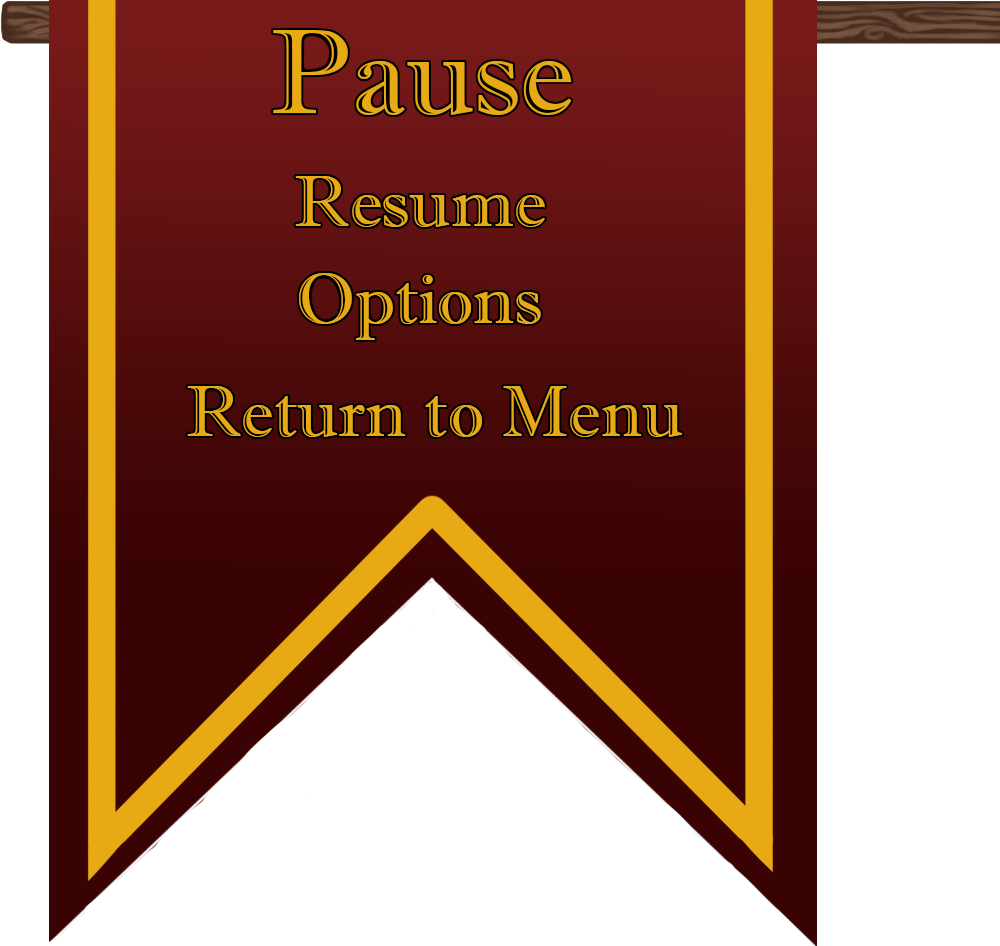
<style>
.page{position:relative;width:1000px;height:946px;background:#ffffff}
.page>*{position:absolute;margin:0}
.t1{font:120px "ImprintMT-Shadow";color:#e7a914}
.t2{font:72px "ImprintMT-Shadow";color:#e7a914}
</style>
<div class="page">
<p class="t1" style="left:273px;top:30px;width:299px;height:85px">Pause</p>
<p class="t2" style="left:295px;top:176px;width:250px;height:51px">Resume</p>
<p class="t2" style="left:299px;top:273px;width:242px;height:67px">Options</p>
<p class="t2" style="left:187px;top:386px;width:495px;height:51px">Return to Menu</p>
</div>
